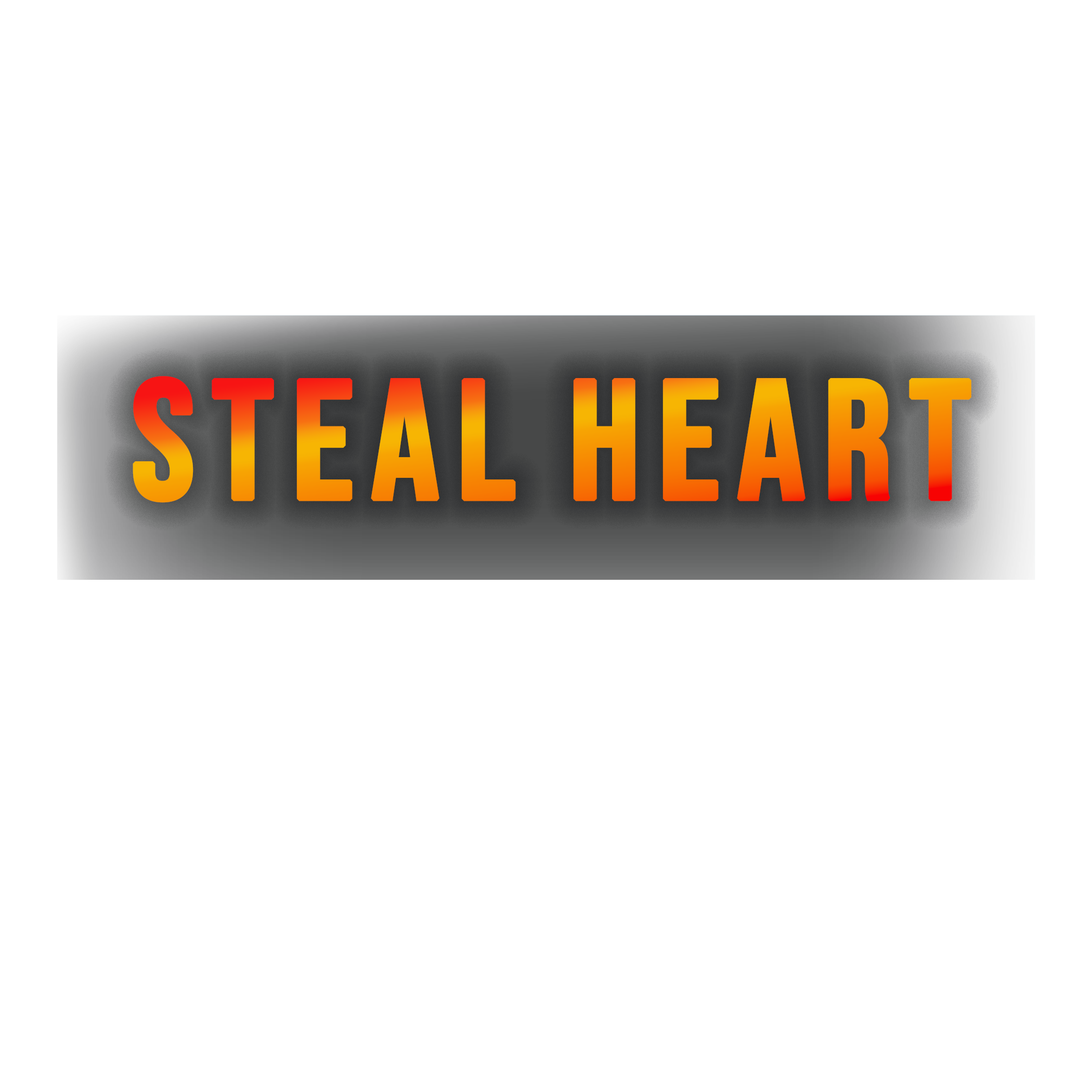
<style>
.page{position:relative;width:1092px;height:1092px;background:#ffffff}
.page>*{position:absolute;margin:0}
.t1{font:169px "BebasNeue-Regular";letter-spacing:0.08em;font-weight:bold}
</style>
<div class="page">
<p class="t1" style="left:133px;top:376px;width:838px;height:127px">STEAL HEART</p>
</div>
